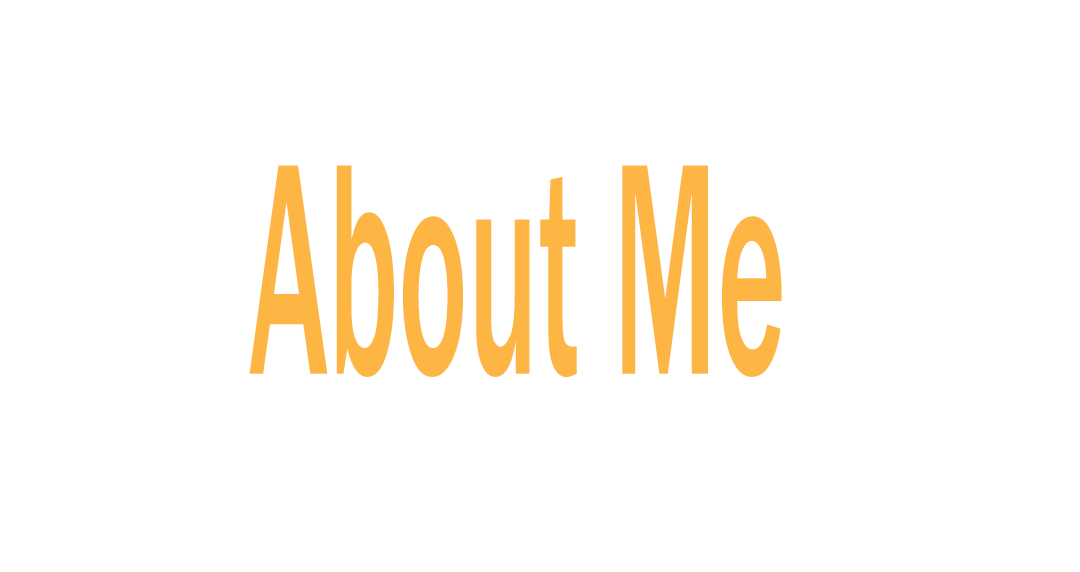
<style>
.page{position:relative;width:1080px;height:572px;background:#ffffff}
.page>*{position:absolute;margin:0}
.t1{font:312.2px "FranklinGothic-Medium";color:#fdb544;scale:0.42 1}
</style>
<div class="page">
<p class="t1" style="left:249px;top:165px;width:533px;height:212px">About Me</p>
</div>
